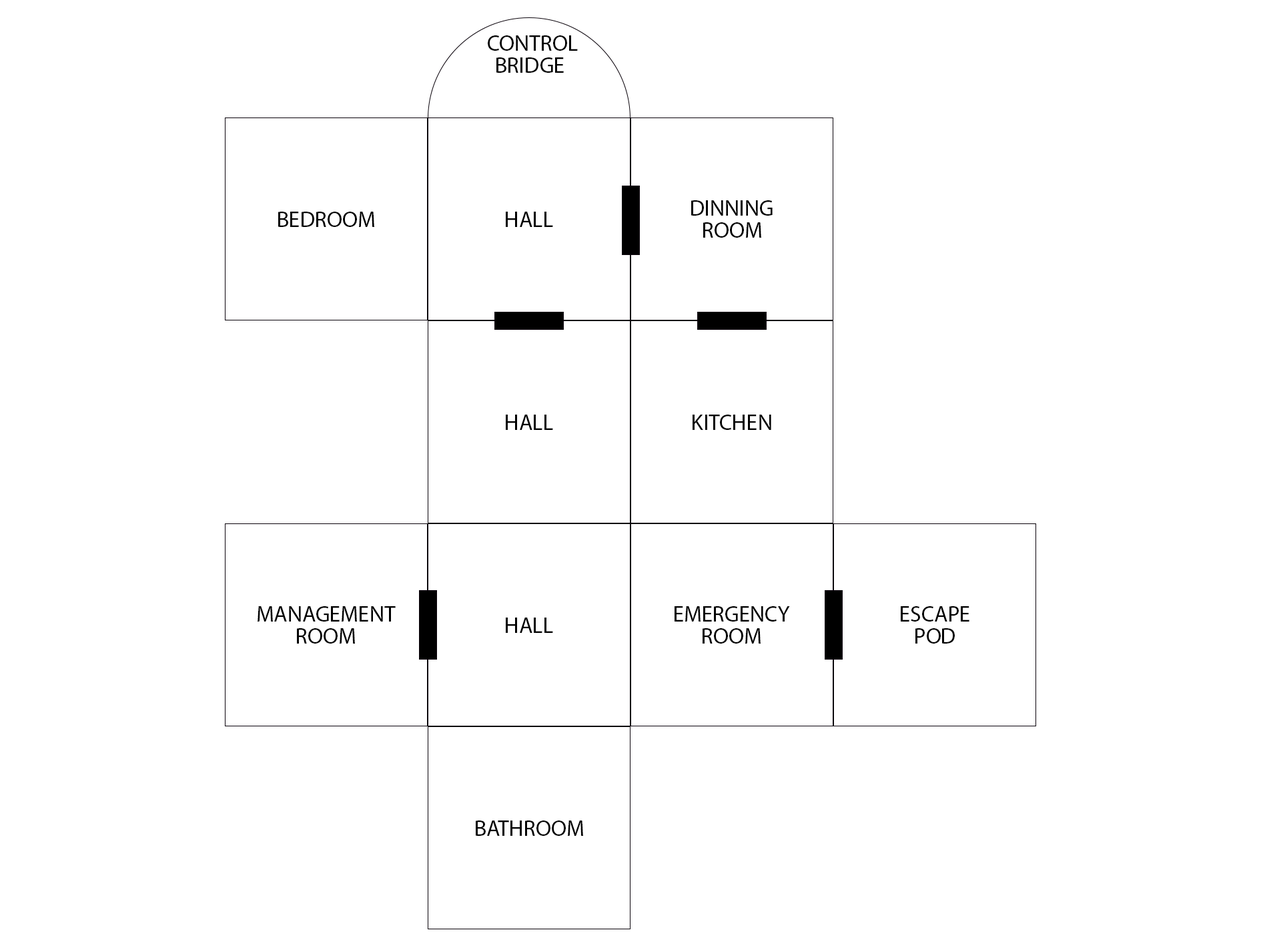
<style>
.page{position:relative;width:1261px;height:946px;background:#ffffff}
.page>*{position:absolute;margin:0}
.t1{font:22.2px/22.2px "MyriadPro-Regular";color:#000000;text-transform:uppercase}
.t2{font:22.2px "MyriadPro-Regular";color:#000000;text-transform:uppercase}
</style>
<div class="page">
<p class="t1" style="left:488px;top:35px;width:90px;height:38px;text-align:center">Control<br>bridge</p>
<p class="t1" style="left:691px;top:200px;width:82px;height:38px;text-align:center">Dinning<br>Room</p>
<p class="t2" style="left:278px;top:212px;width:96px;height:15px">Bedroom</p>
<p class="t2" style="left:506px;top:212px;width:47px;height:15px">Hall</p>
<p class="t2" style="left:506px;top:414px;width:47px;height:16px">Hall</p>
<p class="t2" style="left:693px;top:414px;width:78px;height:16px">Kitchen</p>
<p class="t1" style="left:258px;top:606px;width:138px;height:37px;text-align:center">Management<br>Room</p>
<p class="t1" style="left:675px;top:606px;width:115px;height:37px;text-align:center">Emergency<br>Room</p>
<p class="t1" style="left:901px;top:606px;width:69px;height:37px;text-align:center">Escape<br>Pod</p>
<p class="t2" style="left:506px;top:617px;width:47px;height:16px">Hall</p>
<p class="t2" style="left:476px;top:820px;width:107px;height:15px">Bathroom</p>
</div>
